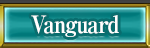
<style>
.page{position:relative;width:150px;height:48px}
.page>*{position:absolute;margin:0}
.t1{font:24px "RyuminPro-ExBold";letter-spacing:-0.08em;color:#ffffff;scale:0.9 1}
</style>
<div class="page">
<p class="t1" style="left:31px;top:15px;width:88px;height:22px">Vanguard</p>
</div>
